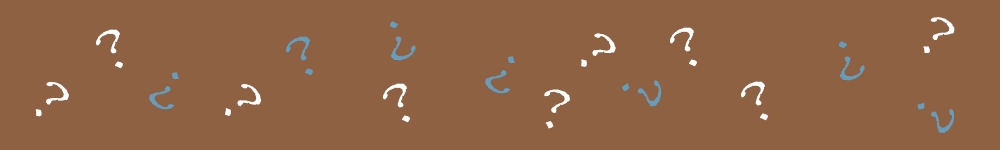
<style>
.page{position:relative;width:1000px;height:150px;background:#8d6141}
.page>*{position:absolute;margin:0}
.t1{font:72px "Papyrus-Regular";color:#ffffff}
.t2{font:72px "Papyrus-Regular";color:#659dbd}
</style>
<div class="page">
<p class="t1" style="left:923px;top:17px;width:32px;height:36px;rotate:36deg">?</p>
<p class="t1" style="left:96px;top:29px;width:27px;height:40px;rotate:-21deg">?</p>
<p class="t2" style="left:390px;top:21px;width:26px;height:40px;rotate:163deg">?</p>
<p class="t1" style="left:670px;top:27px;width:27px;height:40px;rotate:-21deg">?</p>
<p class="t2" style="left:286px;top:36px;width:27px;height:40px;rotate:-21deg">?</p>
<p class="t1" style="left:581px;top:33px;width:35px;height:34px;rotate:48deg">?</p>
<p class="t2" style="left:839px;top:41px;width:26px;height:40px;rotate:163deg">?</p>
<p class="t2" style="left:485px;top:56px;width:30px;height:38px;rotate:-149deg">?</p>
<p class="t2" style="left:149px;top:72px;width:30px;height:38px;rotate:-149deg">?</p>
<p class="t1" style="left:35px;top:81px;width:34px;height:36px;rotate:43deg">?</p>
<p class="t1" style="left:225px;top:84px;width:37px;height:32px;rotate:54deg">?</p>
<p class="t1" style="left:383px;top:83px;width:27px;height:40px;rotate:-21deg">?</p>
<p class="t1" style="left:544px;top:89px;width:26px;height:40px;rotate:17deg">?</p>
<p class="t2" style="left:622px;top:80px;width:40px;height:27px;rotate:104deg">?</p>
<p class="t1" style="left:741px;top:81px;width:27px;height:40px;rotate:-21deg">?</p>
<p class="t2" style="left:917px;top:103px;width:38px;height:30px;rotate:123deg">?</p>
</div>
